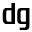
<style>
.page{position:relative;width:32px;height:32px;background:#ffffff}
.page>*{position:absolute;margin:0}
.t1{font:24px "Unispace-Bold";color:#000000}
</style>
<div class="page">
<p class="t1" style="left:2px;top:3px;width:28px;height:27px">dg</p>
</div>
